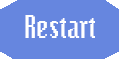
<style>
.page{position:relative;width:119px;height:59px;background:#6686df}
.page>*{position:absolute;margin:0}
.t1{font:33px "Bitmap";color:#ffffff}
</style>
<div class="page">
<p class="t1" style="left:25px;top:15px;width:70px;height:23px">Restart</p>
</div>
